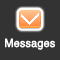
<style>
.page{position:relative;width:60px;height:60px;background:#333333}
.page>*{position:absolute;margin:0}
.t1{font:11.3px "SteinbergChordSymbols";letter-spacing:-0.005em;color:#ffffff;font-weight:bold;scale:0.95 1}
</style>
<div class="page">
<p class="t1" style="left:5px;top:38px;width:50px;height:12px">Messages</p>
</div>
